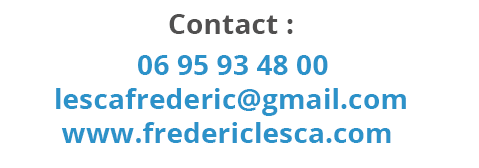
<style>
.page{position:relative;width:479px;height:168px;background:#ffffff}
.page>*{position:absolute;margin:0}
.t1{font:28.3px "OpenSans-Bold";color:#515050}
.t2{font:28.3px "OpenSans-Bold";color:#2c92c9}
.t3{font:14px "OpenSans-Bold";color:#2c92c9}
</style>
<div class="page">
<p class="t1" style="left:169px;top:14px;width:124px;height:20px">Contact :</p>
<p class="t2" style="left:56px;top:55px;width:350px;height:88px;text-align:center"><span class="t3"> </span>06 95 93 48 00<br>lescafrederic@gmail.com<br>www.fredericlesca.com</p>
</div>
